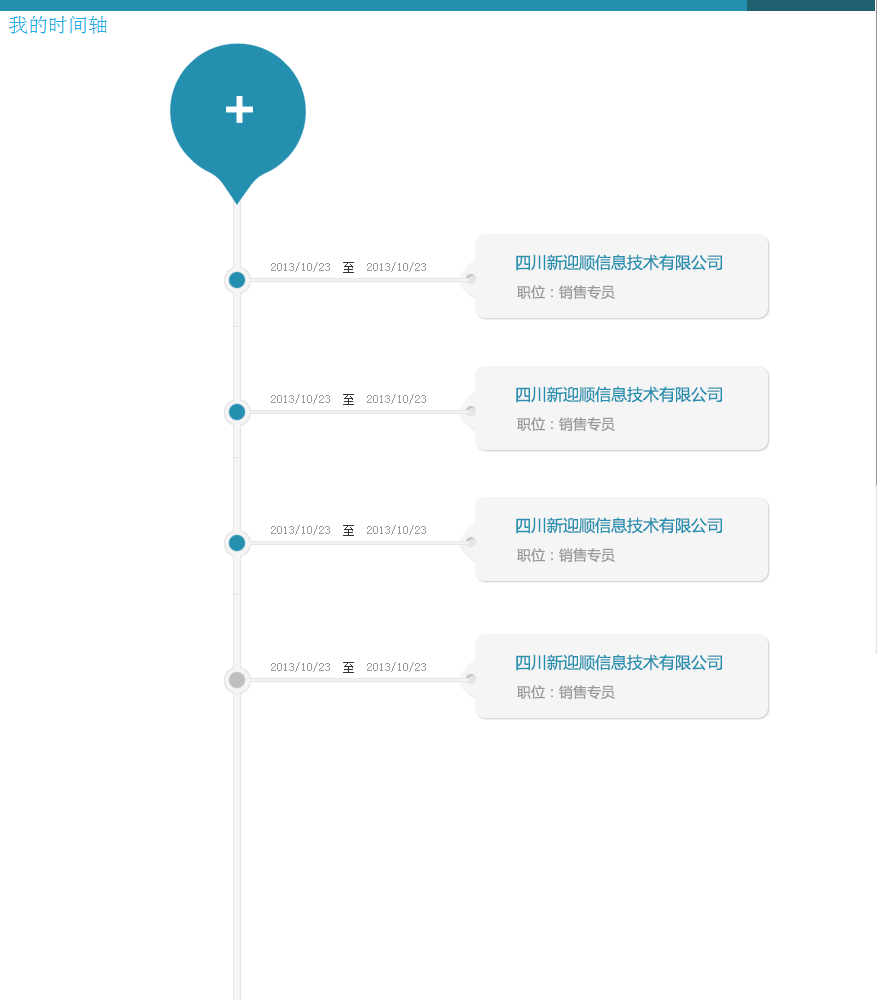
<style>
.page{position:relative;width:877px;height:1000px;background:#ffffff}
.page>*{position:absolute;margin:0}
.t1{font:16px "MicrosoftYaHei";color:#248faf}
.t2{font:12px "NSimSun";color:#999999}
.t3{font:12px "NSimSun";color:#333333}
.t4{font:14px "MicrosoftYaHei";color:#999999}
</style>
<div class="page">
<p class="t1" style="left:516px;top:254px;width:206px;height:17px">四川新迎顺信息技术有限公司</p>
<p class="t2" style="left:271px;top:262px;width:155px;height:11px">2013/10/23  <span class="t3">至  </span>2013/10/23</p>
<p class="t4" style="left:517px;top:285px;width:98px;height:14px">职位：销售专员</p>
<p class="t1" style="left:516px;top:386px;width:206px;height:17px">四川新迎顺信息技术有限公司</p>
<p class="t2" style="left:271px;top:394px;width:155px;height:11px">2013/10/23  <span class="t3">至  </span>2013/10/23</p>
<p class="t4" style="left:517px;top:417px;width:98px;height:14px">职位：销售专员</p>
<p class="t1" style="left:516px;top:517px;width:206px;height:17px">四川新迎顺信息技术有限公司</p>
<p class="t2" style="left:271px;top:525px;width:155px;height:11px">2013/10/23  <span class="t3">至  </span>2013/10/23</p>
<p class="t4" style="left:517px;top:548px;width:98px;height:14px">职位：销售专员</p>
<p class="t1" style="left:516px;top:654px;width:206px;height:17px">四川新迎顺信息技术有限公司</p>
<p class="t2" style="left:271px;top:662px;width:155px;height:11px">2013/10/23  <span class="t3">至  </span>2013/10/23</p>
<p class="t4" style="left:517px;top:685px;width:98px;height:14px">职位：销售专员</p>
</div>
